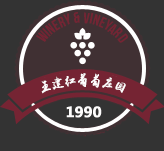
<style>
.page{position:relative;width:164px;height:151px;background:#333333}
.page>*{position:absolute;margin:0}
.t1{font:12px "yuweij";color:#fefdfd;font-weight:bold}
.t2{font:14px "MicrosoftYaHei-Bold";color:#fefdfd;font-weight:bold}
</style>
<div class="page">
<p class="t1" style="left:41px;top:73px;width:85px;height:21px">王建红葡萄庄园</p>
<p class="t2" style="left:66px;top:106px;width:36px;height:12px">1990</p>
</div>
